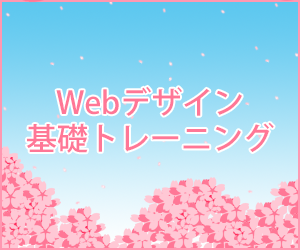
<style>
.page{position:relative;width:300px;height:250px}
.page>*{position:absolute;margin:0}
.t1{font:31px/35px "KozGoPro-Medium";color:#ff7796}
</style>
<div class="page">
<p class="t1" style="left:26px;top:86px;width:248px;height:67px;text-align:center">Webデザイン<br>基礎トレーニング</p>
</div>
